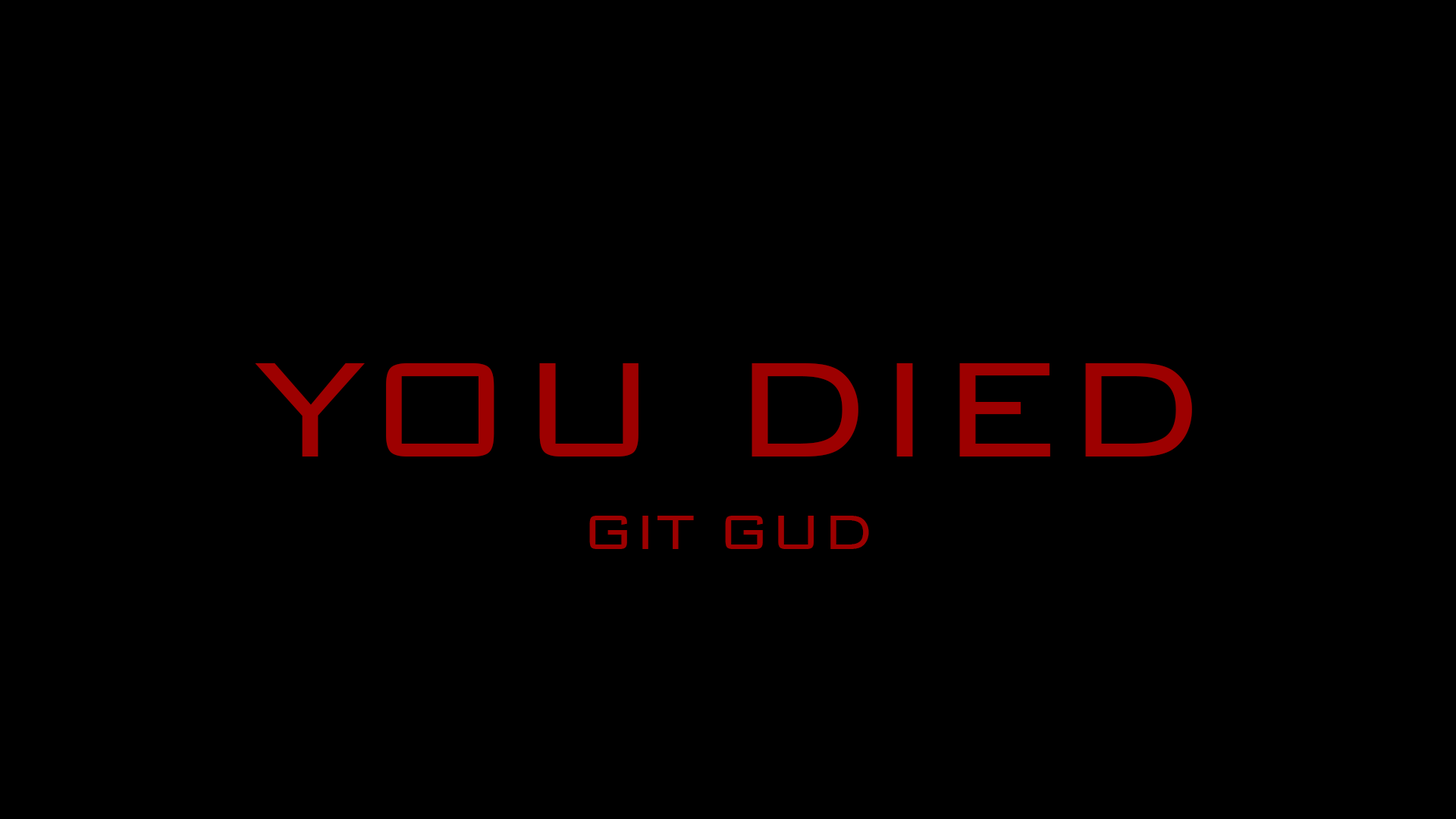
<style>
.page{position:relative;width:1456px;height:819px;background:#000000}
.page>*{position:absolute;margin:0}
.t1{font:180.1px "BankGothicBT-Light";letter-spacing:-0.005em;color:#9d0000}
.t2{font:64.5px "BankGothicBT-Light";letter-spacing:-0.005em;color:#9d0000}
</style>
<div class="page">
<p class="t1" style="left:255px;top:363px;width:937px;height:94px">YOU DIED</p>
<p class="t2" style="left:589px;top:516px;width:280px;height:33px">GIT GUD</p>
</div>
